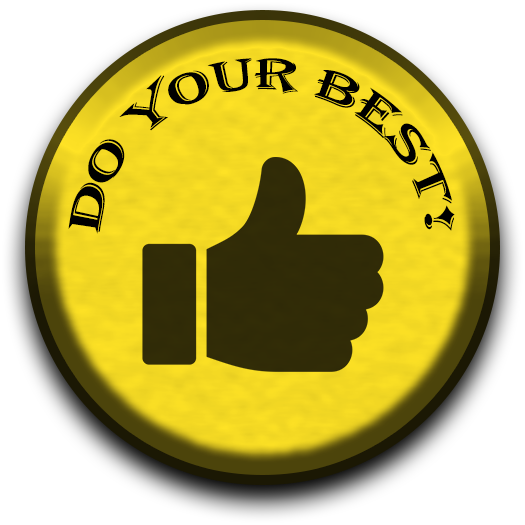
<style>
.page{position:relative;width:525px;height:525px;background:#ffffff}
.page>*{position:absolute;margin:0}
.t1{font:44px "Algerian";color:#000000}
</style>
<div class="page">
<p class="t1" style="left:68px;top:58px;width:387px;height:176px;text-align:center">DO YOUR BEST!</p>
</div>
